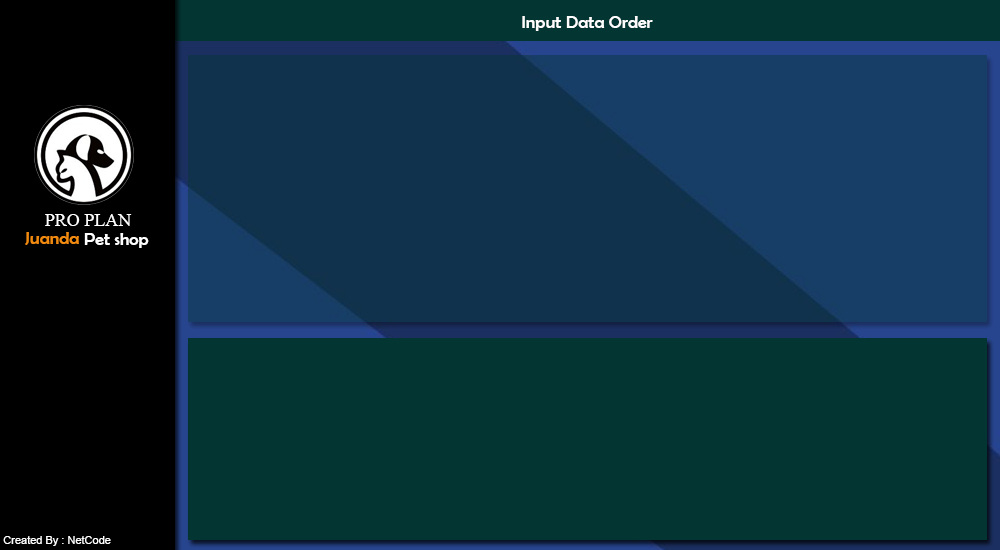
<style>
.page{position:relative;width:1000px;height:550px;background:#033532}
.page>*{position:absolute;margin:0}
.t1{font:18px "BerlinSansFB-Reg";color:#fefefe}
.t2{font:18px "TimesNewRomanPSMT";color:#fefefe}
.t3{font:18px "BerlinSansFB-Reg";color:#f08a11}
.t4{font:11px "ArialMT";color:#fefefe}
</style>
<div class="page">
<p class="t1" style="left:522px;top:16px;width:131px;height:15px">Input Data Order</p>
<p class="t2" style="left:45px;top:214px;width:87px;height:12px">PRO PLAN</p>
<p class="t3" style="left:25px;top:232px;width:54px;height:13px">Juanda</p>
<p class="t1" style="left:84px;top:233px;width:65px;height:15px">Pet shop</p>
<p class="t4" style="left:3px;top:536px;width:108px;height:10px">Created By : NetCode</p>
</div>
